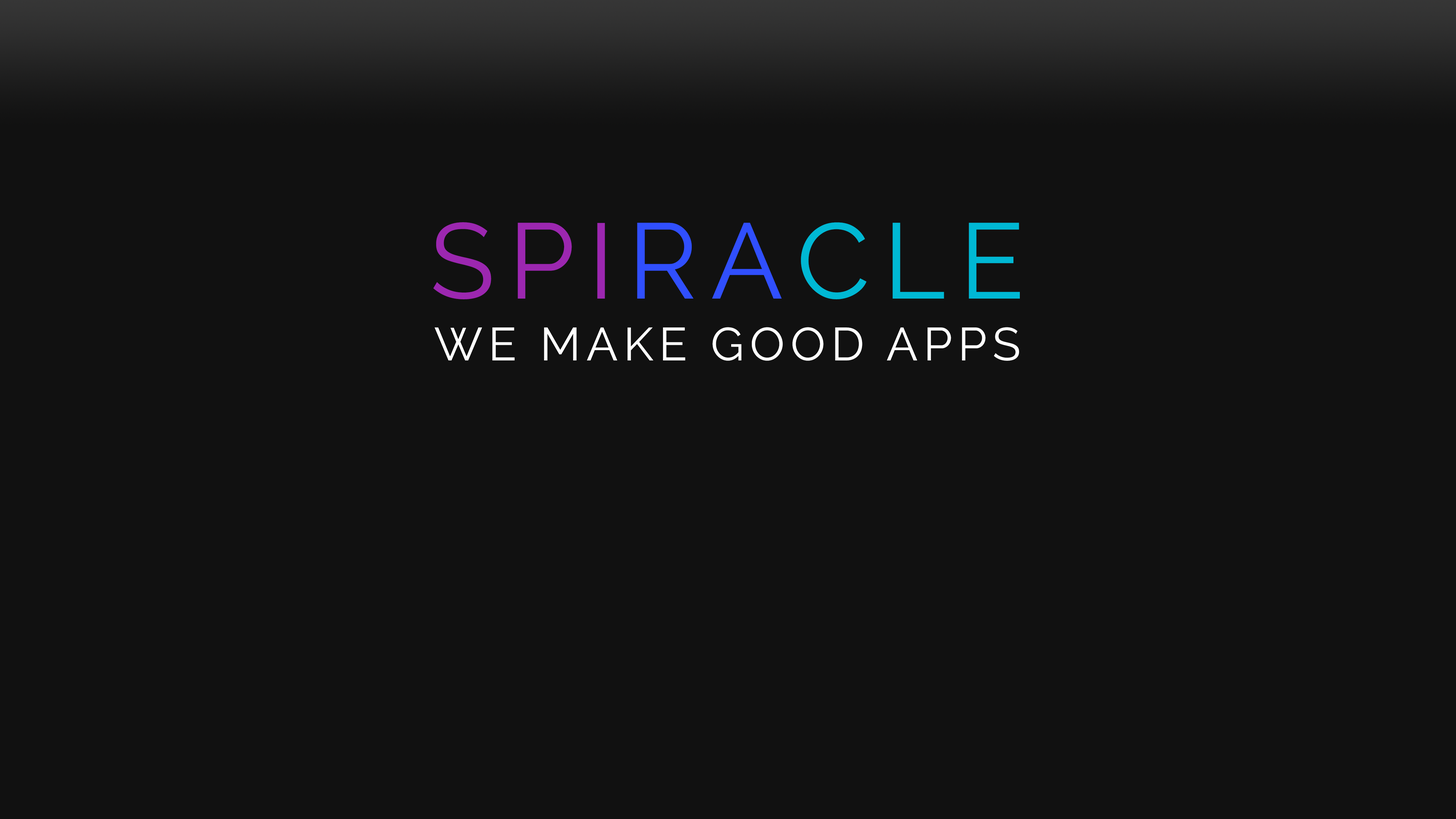
<style>
.page{position:relative;width:1456px;height:819px;background:#111111}
.page>*{position:absolute;margin:0}
.t1{font:106.6px "Raleway";letter-spacing:0.125em;color:#9c27b0;text-transform:uppercase}
.t2{font:106.6px "Raleway";letter-spacing:0.125em;color:#304ffe;text-transform:uppercase}
.t3{font:106.6px "Raleway";letter-spacing:0.125em;color:#00b8d4;text-transform:uppercase}
.t4{font:46.2px "Raleway";letter-spacing:0.125em;color:#ffffff;text-transform:uppercase}
</style>
<div class="page">
<p class="t1" style="left:433px;top:222px;width:587px;height:77px">Spi<span class="t2">ra</span><span class="t3">cle</span></p>
<p class="t4" style="left:434px;top:327px;width:585px;height:34px">We make good apps</p>
</div>
